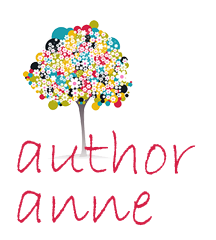
<style>
.page{position:relative;width:216px;height:240px;background:#ffffff}
.page>*{position:absolute;margin:0}
.t1{font:66.8px/50px "BradleyHandITC";color:#d51f45}
</style>
<div class="page">
<p class="t1" style="left:17px;top:130px;width:179px;height:96px">author<br>anne</p>
</div>
